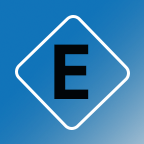
<style>
.page{position:relative;width:144px;height:144px}
.page>*{position:absolute;margin:0}
.t1{font:74.5px "BitstreamVeraSansMono-Bold";color:#010508}
</style>
<div class="page">
<p class="t1" style="left:54px;top:44px;width:35px;height:55px">E</p>
</div>
